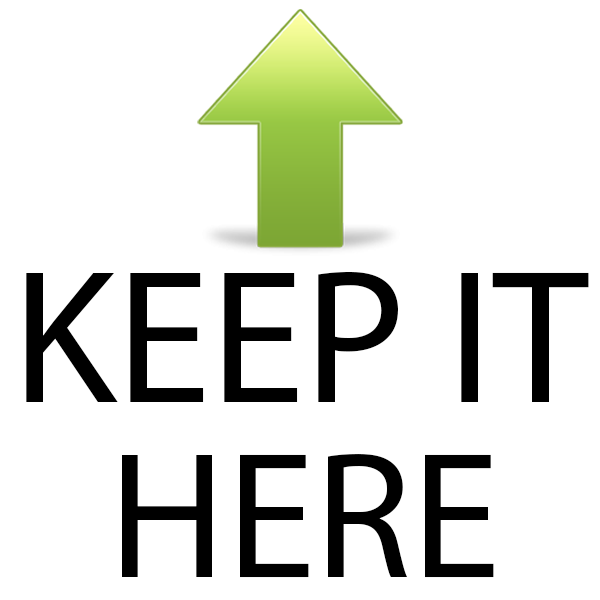
<style>
.page{position:relative;width:600px;height:600px;background:#ffffff}
.page>*{position:absolute;margin:0}
.t1{font:191.9px "MyriadPro-Regular";color:#000000}
.t2{font:180.4px "MyriadPro-Regular";color:#000000}
</style>
<div class="page">
<p class="t1" style="left:26px;top:272px;width:563px;height:130px">KEEP IT</p>
<p class="t2" style="left:122px;top:454px;width:372px;height:124px">HERE</p>
</div>
